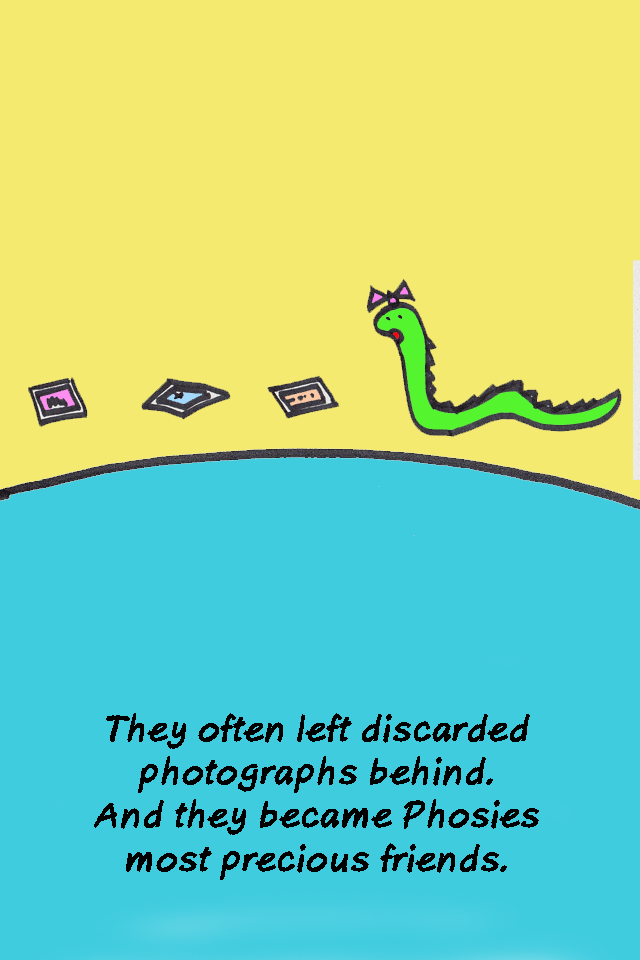
<style>
.page{position:relative;width:640px;height:960px;background:#f4ea70}
.page>*{position:absolute;margin:0}
.t1{font:36px "AxureHandwriting-BoldItalic";color:#000000}
</style>
<div class="page">
<p class="t1" style="left:94px;top:713px;width:445px;height:167px;text-align:center">They often left discarded<br>photographs behind.<br>And they became Phosies<br>most precious friends.</p>
</div>
